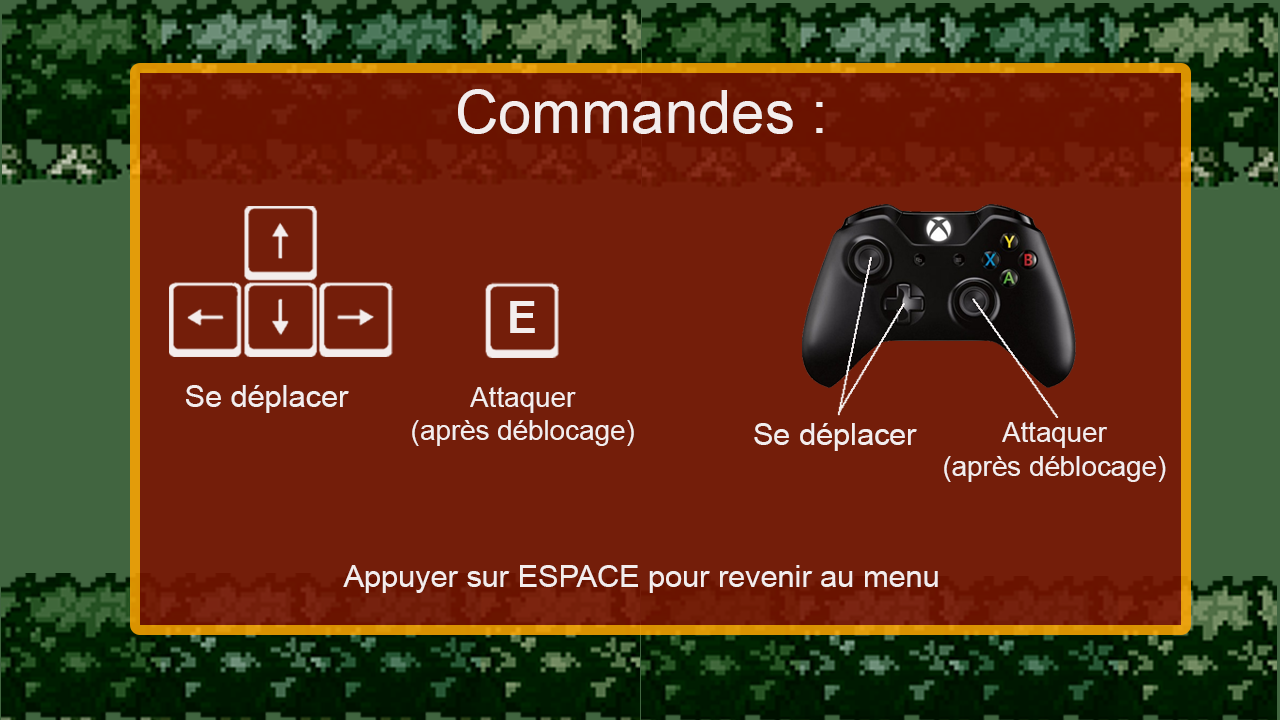
<style>
.page{position:relative;width:1280px;height:720px;background:#741e0a}
.page>*{position:absolute;margin:0}
.t1{font:60px "ArialMT";color:#f3eded}
.t2{font:45.2px "Arial-BoldMT";color:#f3eded}
.t3{font:30.7px "ArialMT";color:#f3eded}
.t4{font:27.8px "ArialMT";color:#f3eded}
</style>
<div class="page">
<p class="t1" style="left:458px;top:89px;width:365px;height:45px">Commandes :</p>
<p class="t2" style="left:510px;top:301px;width:25px;height:32px">E</p>
<p class="t3" style="left:186px;top:385px;width:163px;height:28px">Se déplacer</p>
<p class="t4" style="left:412px;top:387px;width:222px;height:59px;text-align:center">Attaquer<br>(après déblocage)</p>
<p class="t3" style="left:754px;top:423px;width:163px;height:28px">Se déplacer</p>
<p class="t4" style="left:944px;top:422px;width:222px;height:60px;text-align:center">Attaquer<br>(après déblocage)</p>
<p class="t3" style="left:343px;top:565px;width:595px;height:28px">Appuyer sur ESPACE pour revenir au menu</p>
</div>
